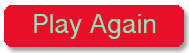
<style>
.page{position:relative;width:189px;height:53px;background:#e7102a}
.page>*{position:absolute;margin:0}
.t1{font:24px "BanglaSangamMN";color:#8ce6ba}
</style>
<div class="page">
<p class="t1" style="left:34px;top:14px;width:122px;height:25px">Play Again</p>
</div>
